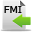
<style>
.page{position:relative;width:32px;height:32px}
.page>*{position:absolute;margin:0}
.t1{font:10px "Verdana";color:#070707}
</style>
<div class="page">
<p class="t1" style="left:4px;top:6px;width:18px;height:7px">FMI</p>
</div>
